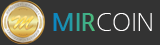
<style>
.page{position:relative;width:160px;height:45px;background:#333333}
.page>*{position:absolute;margin:0}
.t1{font:24px "NanumGothicBold"}
.t2{font:24px "NanumGothicLight";color:#fffefe}
</style>
<div class="page">
<p class="t1" style="left:53px;top:13px;width:42px;height:18px">MIR</p>
<p class="t2" style="left:97px;top:13px;width:55px;height:18px">COIN</p>
</div>
